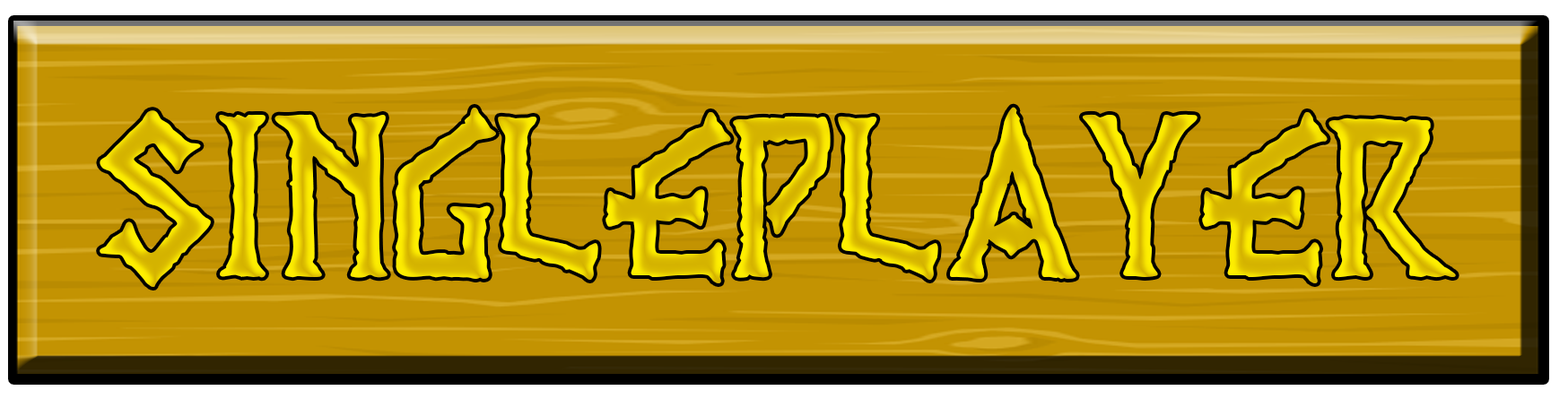
<style>
.page{position:relative;width:1568px;height:399px;background:#c39302}
.page>*{position:absolute;margin:0}
.t1{font:171.1px "PRViking01";font-weight:bold}
</style>
<div class="page">
<p class="t1" style="left:100px;top:107px;width:1356px;height:180px">SINGLEPLAYER</p>
</div>
